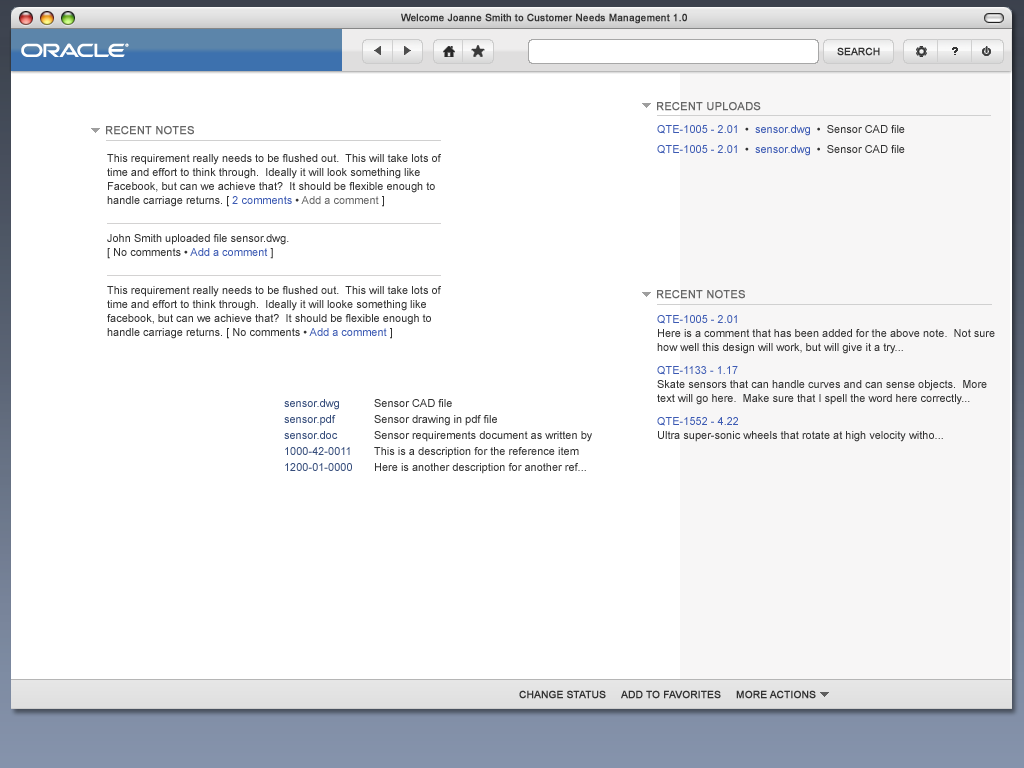
<style>
.page{position:relative;width:1024px;height:768px;background:#ffffff}
.page>*{position:absolute;margin:0}
.t1{font:10px "ArialMT";color:#333333;font-weight:bold}
.t2{font:11px "ArialMT";color:#666666;font-weight:bold}
.t3{font:11px "ArialMT";color:#666666;text-transform:uppercase;font-weight:bold}
.t4{font:11px "ArialMT";color:#333333}
.t5{font:11px "ArialMT";color:#3c5ab3}
.t6{font:11px/14px "ArialMT";color:#333333}
.t7{font:11px/14px "ArialMT";color:#3c5ab3}
.t8{font:11px/14px "ArialMT";color:#666666}
.t9{font:11px/18px "ArialMT";color:#3c5ab3}
.t10{font:11px/16px "ArialMT";color:#364d7b}
.t11{font:11px/20px "ArialMT";color:#364d7b}
.t12{font:11px/16px "ArialMT";color:#333333}
.t13{font:11px/20px "ArialMT";color:#333333}
.t14{font:10px "ArialMT";color:#333333;text-transform:uppercase;font-weight:bold}
</style>
<div class="page">
<p class="t1" style="left:401px;top:13px;width:286px;height:11px">Welcome Joanne Smith to Customer Needs Management 1.0</p>
<p class="t1" style="left:837px;top:47px;width:43px;height:9px">SEARCH</p>
<p class="t2" style="left:657px;top:102px;width:104px;height:9px">RECENT UPLOADS</p>
<p class="t3" style="left:106px;top:126px;width:88px;height:9px">recent <span class="t2">N</span>otes</p>
<p class="t4" style="left:657px;top:125px;width:248px;height:11px"><span class="t5">QTE-1005 - 2.01  </span>•  <span class="t5">sensor.dwg</span>  •  Sensor CAD file</p>
<p class="t4" style="left:657px;top:145px;width:248px;height:11px"><span class="t5">QTE-1005 - 2.01  </span>•  <span class="t5">sensor.dwg</span>  •  Sensor CAD file</p>
<p class="t6" style="left:107px;top:154px;width:334px;height:53px">This requirement really needs to be flushed out.  This will take lots of <br>time and effort to think through.  Ideally it will look something like<br>Facebook, but can we achieve that?  It should be flexible enough to<br>handle carriage returns. [ <span class="t7">2 comments</span> • <span class="t8">Add a comment </span>]</p>
<p class="t6" style="left:107px;top:234px;width:182px;height:25px">John Smith uploaded file sensor.dwg. <br>[ No comments •<span class="t7"> Add a comment </span>]</p>
<p class="t6" style="left:107px;top:286px;width:334px;height:53px">This requirement really needs to be flushed out.  This will take lots of <br>time and effort to think through.  Ideally it will looke something like<br>facebook, but can we achieve that?  It should be flexible enough to<br>handle carriage returns. [ No comments •<span class="t7"> Add a comment </span>]</p>
<p class="t3" style="left:657px;top:290px;width:88px;height:9px">recent <span class="t2">N</span>otes</p>
<p class="t6" style="left:657px;top:315px;width:338px;height:39px"><span class="t9">QTE-1005 - 2.01<br></span>Here is a comment that has been added for the above note.  Not sure <br>how well this design will work, but will give it a try...</p>
<p class="t6" style="left:657px;top:366px;width:330px;height:39px"><span class="t9">QTE-1133 - 1.17<br></span>Skate sensors that can handle curves and can sense objects.  More<br>text will go here.  Make sure that I spell the word here correctly...</p>
<p class="t10" style="left:284px;top:399px;width:68px;height:72px"><span class="t11">sensor.dwg<br></span>sensor.pdf<br>sensor.doc<br>1000-42-0011<br>1200-01-0000</p>
<p class="t12" style="left:374px;top:399px;width:218px;height:75px"><span class="t13">Sensor CAD file<br></span>Sensor drawing in pdf file<br>Sensor requirements document as written by<br>This is a description for the reference item <br>Here is another description for another ref...</p>
<p class="t6" style="left:657px;top:417px;width:286px;height:25px"><span class="t9">QTE-1552 - 4.22<br></span>Ultra super-sonic wheels that rotate at high velocity witho...</p>
<p class="t14" style="left:519px;top:690px;width:87px;height:9px">Change Status</p>
<p class="t14" style="left:621px;top:690px;width:100px;height:9px">Add to favorites</p>
<p class="t14" style="left:736px;top:690px;width:80px;height:9px">More actions</p>
</div>
